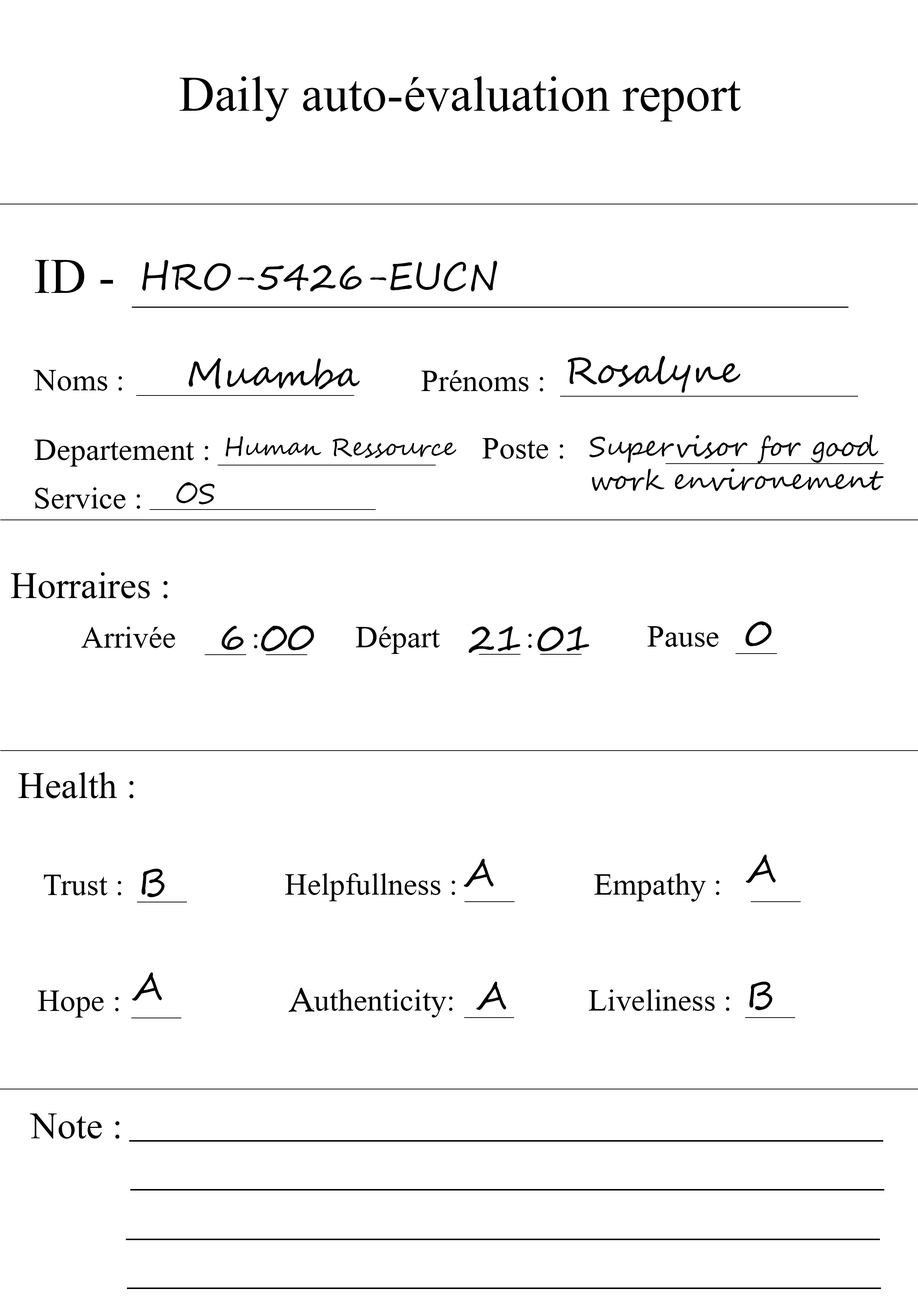
<style>
.page{position:relative;width:918px;height:1299px;background:#ffffff}
.page>*{position:absolute;margin:0}
.t1{font:74px "Microsoft-Himalaya";color:#000000}
.t2{font:37px "SegoeScript";color:#000000}
.t3{font:46.3px "Microsoft-Himalaya";color:#000000}
.t4{font:24.7px "SegoeScript";color:#000000}
.t5{font:27.8px "SegoeScript";color:#000000}
.t6{font:55.5px "Microsoft-Himalaya";color:#000000}
.t7{font:37px "HighTowerText-Reg";color:#000000}
</style>
<div class="page">
<p class="t1" style="left:180px;top:76px;width:561px;height:45px">Daily auto-évaluation report</p>
<p class="t1" style="left:35px;top:260px;width:78px;height:33px">ID -</p>
<p class="t2" style="left:142px;top:260px;width:355px;height:31px">HRO-5426-EUCN</p>
<p class="t2" style="left:188px;top:358px;width:172px;height:31px">Muamba</p>
<p class="t2" style="left:568px;top:356px;width:172px;height:37px">Rosalyne</p>
<p class="t3" style="left:34px;top:370px;width:88px;height:21px">Noms :</p>
<p class="t3" style="left:421px;top:370px;width:122px;height:21px">Prénoms :</p>
<p class="t4" style="left:225px;top:436px;width:231px;height:22px">Human Ressource</p>
<p class="t3" style="left:482px;top:438px;width:81px;height:21px">Poste :</p>
<p class="t5" style="left:589px;top:435px;width:295px;height:56px">Supervisor for good <br>work environement</p>
<p class="t3" style="left:34px;top:439px;width:174px;height:27px">Departement :</p>
<p class="t5" style="left:176px;top:482px;width:39px;height:22px">OS</p>
<p class="t3" style="left:35px;top:487px;width:105px;height:22px">Service :</p>
<p class="t6" style="left:11px;top:572px;width:157px;height:26px">Horraires :</p>
<p class="t3" style="left:81px;top:626px;width:94px;height:22px">Arrivée</p>
<p class="t2" style="left:221px;top:625px;width:93px;height:26px">6 00</p>
<p class="t3" style="left:356px;top:626px;width:84px;height:28px">Départ</p>
<p class="t2" style="left:469px;top:626px;width:120px;height:27px">21 01</p>
<p class="t3" style="left:648px;top:626px;width:71px;height:21px">Pause</p>
<p class="t2" style="left:746px;top:621px;width:26px;height:25px">0</p>
<p class="t3" style="left:254px;top:634px;width:4px;height:14px">:</p>
<p class="t3" style="left:528px;top:633px;width:4px;height:15px">:</p>
<p class="t6" style="left:18px;top:772px;width:116px;height:26px">Health :</p>
<p class="t2" style="left:746px;top:854px;width:30px;height:29px">A</p>
<p class="t2" style="left:141px;top:869px;width:24px;height:28px">B</p>
<p class="t2" style="left:464px;top:859px;width:30px;height:28px">A</p>
<p class="t3" style="left:44px;top:874px;width:77px;height:21px">Trust :</p>
<p class="t3" style="left:285px;top:873px;width:170px;height:28px">Helpfullness :</p>
<p class="t3" style="left:594px;top:873px;width:126px;height:28px">Empathy :</p>
<p class="t2" style="left:132px;top:972px;width:30px;height:29px">A</p>
<p class="t7" style="left:288px;top:987px;width:27px;height:25px">A</p>
<p class="t3" style="left:301px;top:989px;width:152px;height:28px">authenticity:</p>
<p class="t2" style="left:476px;top:981px;width:30px;height:29px">A</p>
<p class="t3" style="left:589px;top:989px;width:141px;height:22px">Liveliness :</p>
<p class="t2" style="left:749px;top:981px;width:24px;height:29px">B</p>
<p class="t3" style="left:38px;top:990px;width:81px;height:27px">Hope :</p>
<p class="t6" style="left:30px;top:1113px;width:90px;height:25px">Note :</p>
</div>
